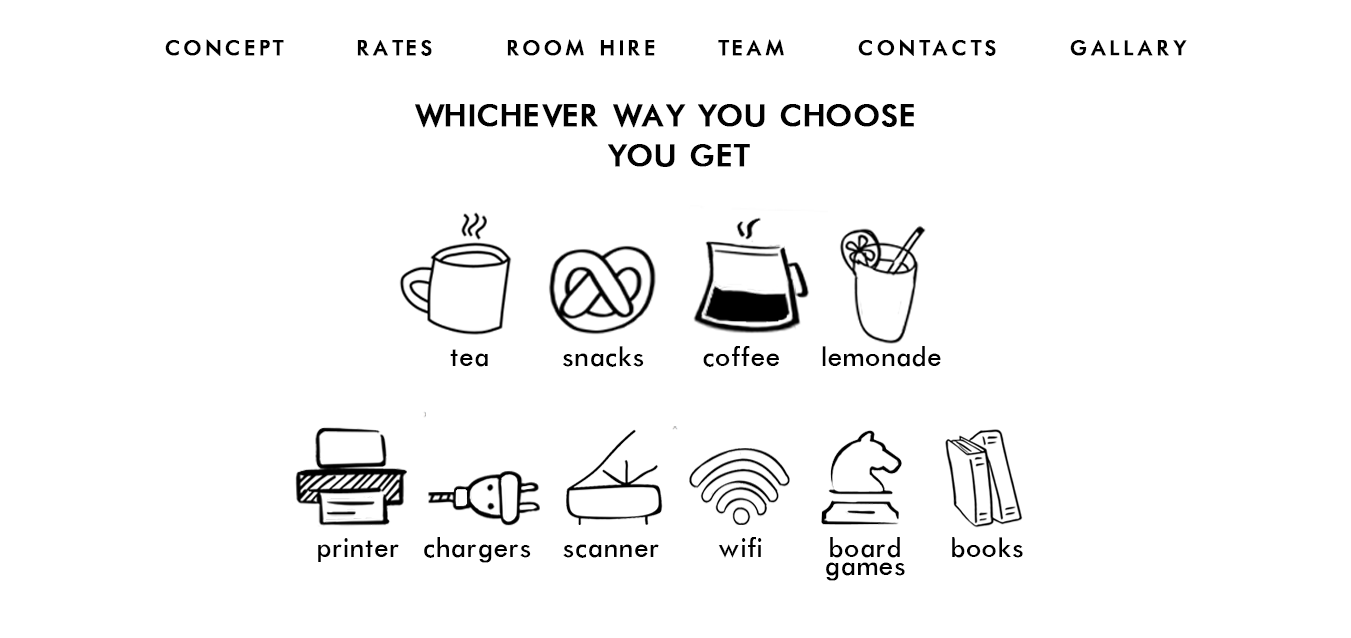
<style>
.page{position:relative;width:1351px;height:638px;background:#ffffff}
.page>*{position:absolute;margin:0}
.t1{font:24px "Futura-Normal";letter-spacing:0.12em;color:#000000;text-transform:uppercase;font-weight:bold}
.t2{font:35px/40px "Futura-Normal";color:#010101;text-transform:uppercase;font-weight:bold}
.t3{font:30px "Futura-Normal";letter-spacing:0.01em;color:#000000}
.t4{font:30.1px "Futura-Normal";letter-spacing:0.01em;color:#000000}
.t5{font:30.1px/18px "Futura-Normal";letter-spacing:0.01em;color:#000000}
</style>
<div class="page">
<p class="t1" style="left:165px;top:39px;width:1022px;height:17px">concept      rates      room hire     team      contacts      gallary</p>
<p class="t2" style="left:415px;top:103px;width:499px;height:64px;text-align:center">Whichever way you choose  <br>you get</p>
<p class="t3" style="left:450px;top:349px;width:38px;height:18px">tea</p>
<p class="t3" style="left:563px;top:346px;width:81px;height:21px">snacks</p>
<p class="t3" style="left:703px;top:346px;width:76px;height:21px">coffee</p>
<p class="t3" style="left:822px;top:346px;width:119px;height:21px">lemonade</p>
<p class="t4" style="left:318px;top:538px;width:81px;height:24px">printer</p>
<p class="t4" style="left:424px;top:537px;width:107px;height:26px">chargers</p>
<p class="t4" style="left:563px;top:544px;width:96px;height:14px">scanner</p>
<p class="t4" style="left:718px;top:537px;width:44px;height:21px">wifi</p>
<p class="t5" style="left:826px;top:537px;width:79px;height:44px;text-align:center">board<br>games</p>
<p class="t4" style="left:952px;top:537px;width:71px;height:21px">books</p>
</div>
